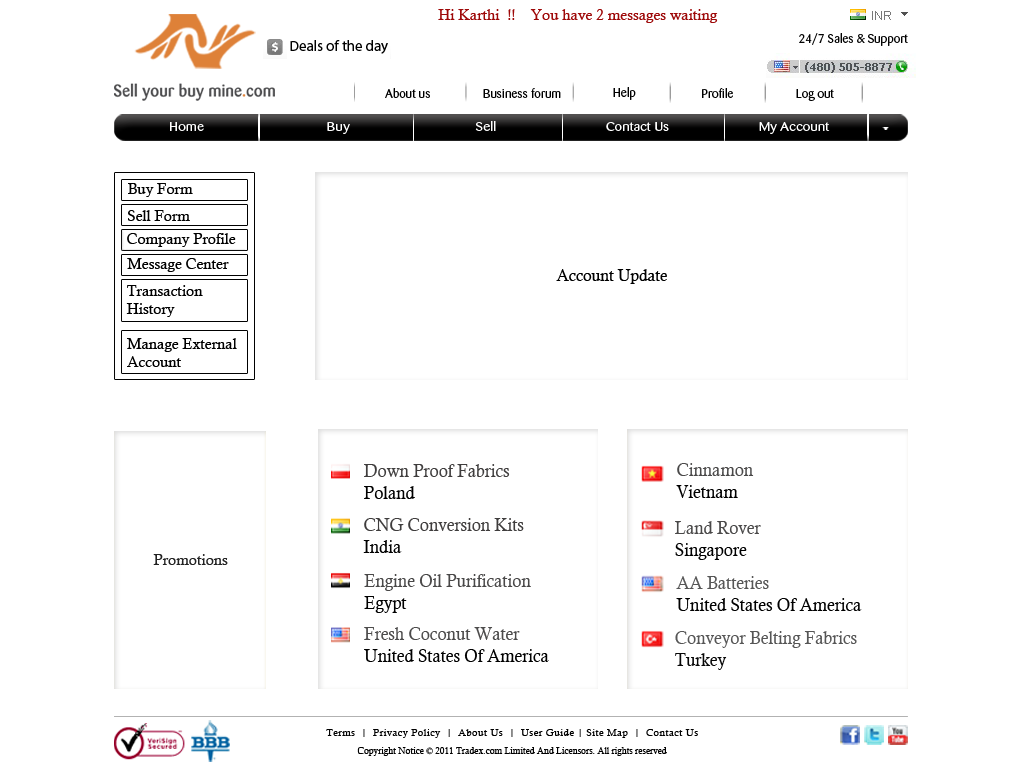
<style>
.page{position:relative;width:1024px;height:768px;background:#ffffff}
.page>*{position:absolute;margin:0}
.t1{font:15px "CalistoMT";color:#9e0909}
.t2{font:14.9px "MyriadPro-Regular";color:#000000}
.t3{font:12px "Barmeno-Regular";color:#030303;scale:1.05 1}
.t4{font:12px "Barmeno-Regular";color:#000000;scale:1.05 1}
.t5{font:12.1px "Barmeno-Regular";color:#ffffff;scale:1.2 1}
.t6{font:15px "CalistoMT";color:#000000}
.t7{font:15.8px "CalistoMT";color:#000000}
.t8{font:18.2px "CalistoMT";color:#3f3d3d;scale:0.93 1}
.t9{font:18.2px "CalistoMT";color:#000000;scale:0.93 1}
.t10{font:18.2px "CalistoMT";color:#4a4949;scale:0.93 1}
.t11{font:15px "CalistoMT";color:#222222}
.t12{font:18.2px "CalistoMT";color:#494848;scale:0.93 1}
.t13{font:18.2px "CalistoMT";color:#565656;scale:0.93 1}
.t14{font:18.2px "CalistoMT";color:#4c4b4b;scale:0.93 1}
.t15{font:18.2px "CalistoMT";color:#070707;scale:0.93 1}
.t16{font:10px/18px "CalistoMT";letter-spacing:0.045em;color:#000000}
.t17{font:9px/18px "CalistoMT";color:#000000}
</style>
<div class="page">
<p class="t1" style="left:438px;top:9px;width:280px;height:14px">Hi Karthi  !!    You have 2 messages waiting</p>
<p class="t2" style="left:290px;top:40px;width:98px;height:14px">Deals of the day</p>
<p class="t3" style="left:799px;top:33px;width:109px;height:13px">24/7 Sales &amp; Support</p>
<p class="t4" style="left:385px;top:88px;width:45px;height:10px">About us</p>
<p class="t4" style="left:483px;top:88px;width:78px;height:10px">Business forum</p>
<p class="t4" style="left:613px;top:87px;width:23px;height:13px">Help</p>
<p class="t4" style="left:702px;top:88px;width:31px;height:10px">Profile</p>
<p class="t4" style="left:796px;top:89px;width:38px;height:12px">Log out</p>
<p class="t5" style="left:170px;top:121px;width:660px;height:13px">Home                                     Buy                                      Sell                                 Contact Us                           My Account</p>
<p class="t6" style="left:128px;top:183px;width:65px;height:14px">Buy Form</p>
<p class="t6" style="left:128px;top:210px;width:62px;height:11px">Sell Form</p>
<p class="t6" style="left:127px;top:233px;width:109px;height:14px">Company Profile</p>
<p class="t6" style="left:127px;top:258px;width:102px;height:14px">Message Center</p>
<p class="t7" style="left:556px;top:269px;width:111px;height:15px">Account Update</p>
<p class="t6" style="left:126px;top:285px;width:77px;height:32px">Transaction<br>History</p>
<p class="t6" style="left:127px;top:338px;width:110px;height:29px">Manage External<br>Account</p>
<p class="t8" style="left:364px;top:464px;width:146px;height:35px">Down Proof Fabrics<br><span class="t9">Poland</span></p>
<p class="t10" style="left:676px;top:463px;width:78px;height:35px">Cinnamon<br><span class="t9">Vietnam</span></p>
<p class="t8" style="left:363px;top:518px;width:161px;height:35px">CNG Conversion Kits<br><span class="t9">India</span></p>
<p class="t10" style="left:675px;top:521px;width:86px;height:39px">Land Rover<br><span class="t9">Singapore</span></p>
<p class="t11" style="left:153px;top:554px;width:75px;height:11px">Promotions</p>
<p class="t12" style="left:364px;top:574px;width:167px;height:39px">Engine Oil Purification<br><span class="t9">Egypt</span></p>
<p class="t9" style="left:676px;top:576px;width:186px;height:35px"><span class="t13">AA Batteries<br></span>United States Of America</p>
<p class="t9" style="left:364px;top:627px;width:185px;height:35px"><span class="t14">Fresh Coconut Water<br></span>United States Of America</p>
<p class="t13" style="left:675px;top:631px;width:182px;height:39px">Conveyor Belting Fabrics<br><span class="t15">Turkey</span></p>
<p class="t16" style="left:326px;top:729px;width:372px;height:27px;text-align:center">Terms  |  Privacy Policy  |  About Us  |  User Guide | Site Map  |  Contact Us<br><span class="t17">Copyright Notice © 2011 Tradex.com Limited And Licensors. All rights reserved</span></p>
</div>
